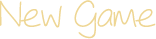
<style>
.page{position:relative;width:156px;height:39px;background:#ffffff}
.page>*{position:absolute;margin:0}
.t1{font:32px "AsCuteAs-Regular";color:#eed694}
</style>
<div class="page">
<p class="t1" style="left:0px;top:0px;width:156px;height:39px">New Game</p>
</div>
